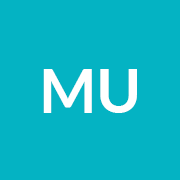
<style>
.page{position:relative;width:180px;height:180px;background:#04b3c3}
.page>*{position:absolute;margin:0}
.t1{font:61px "Lato-Bold";color:#ffffff;text-transform:uppercase}
</style>
<div class="page">
<p class="t1" style="left:43px;top:69px;width:94px;height:44px">MU</p>
</div>
